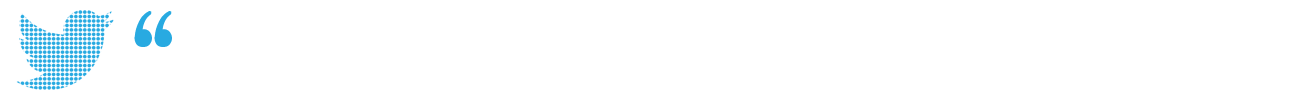
<style>
.page{position:relative;width:1300px;height:100px;background:#ffffff}
.page>*{position:absolute;margin:0}
.t1{font:200px "ConeriaScriptDemo";color:#28aae1}
</style>
<div class="page">
<p class="t1" style="left:134px;top:11px;width:38px;height:36px">“</p>
</div>
